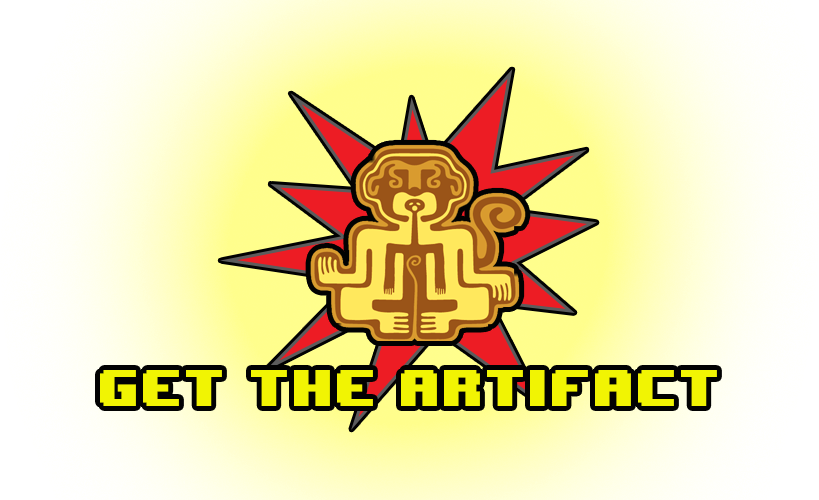
<style>
.page{position:relative;width:819px;height:500px}
.page>*{position:absolute;margin:0}
.t1{font:43px "8BITWONDERNominal";color:#f1f403}
</style>
<div class="page">
<p class="t1" style="left:100px;top:370px;width:617px;height:36px">get the artifact</p>
</div>
